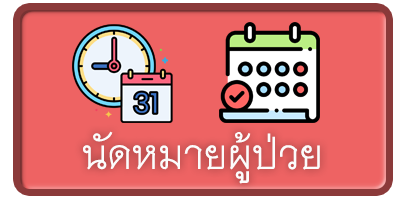
<style>
.page{position:relative;width:400px;height:200px;background:#ee6363}
.page>*{position:absolute;margin:0}
.t1{font:58.3px "THNiramitAS";color:#fcfcfc}
</style>
<div class="page">
<p class="t1" style="left:83px;top:131px;width:237px;height:53px">นัดหมายผู้ป่วย</p>
</div>
